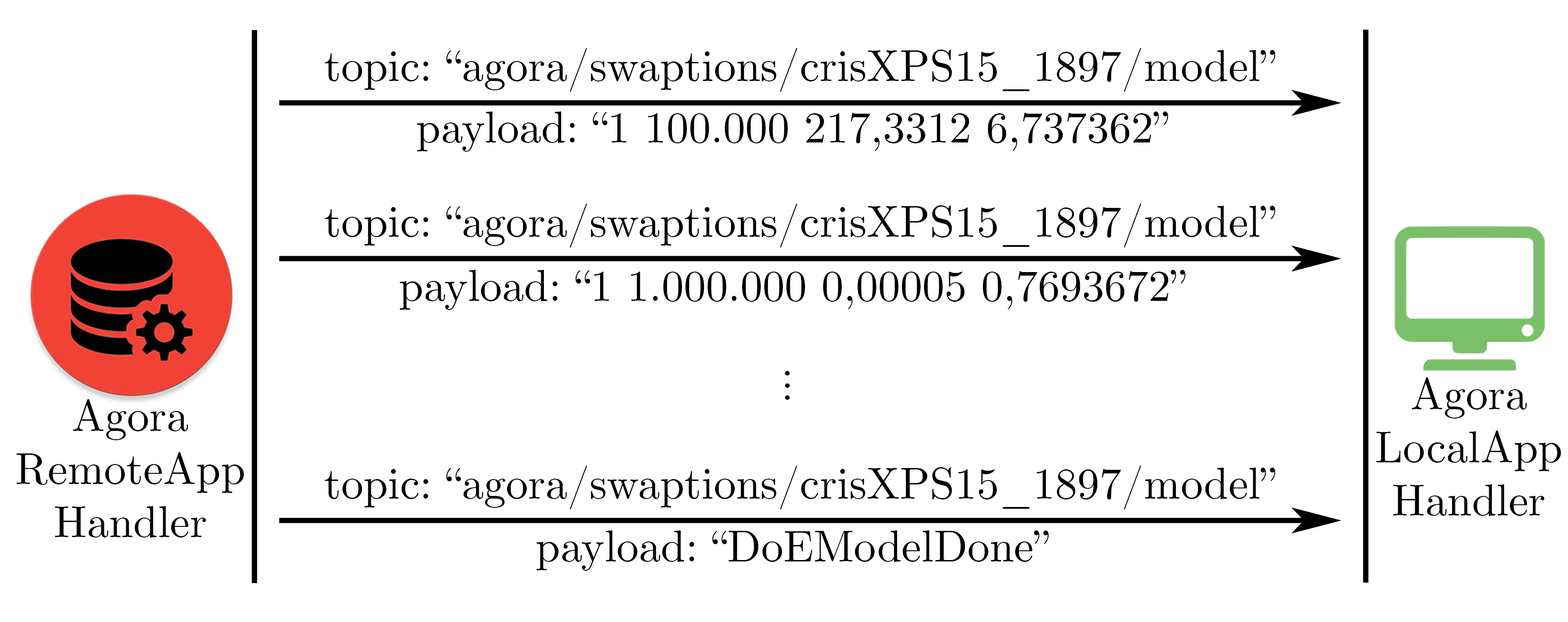
<style>
.page{position:relative;width:1568px;height:622px;background:#ffffff}
.page>*{position:absolute;margin:0}
.t1{font:44.3px "CMUSerif-Roman";color:#000000}
</style>
<div class="page">
<p class="t1" style="left:324px;top:48px;width:951px;height:44px">topic: “agora/swaptions/crisXPS15_1897/model”</p>
<p class="t1" style="left:417px;top:112px;width:751px;height:40px">payload: “1 100.000 217,3312 6,737362”</p>
<p class="t1" style="left:324px;top:204px;width:951px;height:44px">topic: “agora/swaptions/crisXPS15_1897/model”</p>
<p class="t1" style="left:400px;top:270px;width:786px;height:40px">payload: “1 1.000.000 0,00005 0,7693672”</p>
<p class="t1" style="left:785px;top:371px;width:5px;height:29px;rotate:90deg">...</p>
<p class="t1" style="left:1376px;top:378px;width:185px;height:138px;text-align:center">Agora<br>LocalApp<br>Handler</p>
<p class="t1" style="left:16px;top:399px;width:228px;height:139px;text-align:center">Agora<br>RemoteApp<br>Handler</p>
<p class="t1" style="left:324px;top:466px;width:951px;height:44px">topic: “agora/swaptions/crisXPS15_1897/model”</p>
<p class="t1" style="left:536px;top:531px;width:513px;height:40px">payload: “DoEModelDone”</p>
</div>
